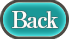
<style>
.page{position:relative;width:69px;height:39px}
.page>*{position:absolute;margin:0}
.t1{font:22px "RyuminPro-ExBold";letter-spacing:-0.08em;color:#fdfbf9}
</style>
<div class="page">
<p class="t1" style="left:12px;top:11px;width:46px;height:17px">Back</p>
</div>
